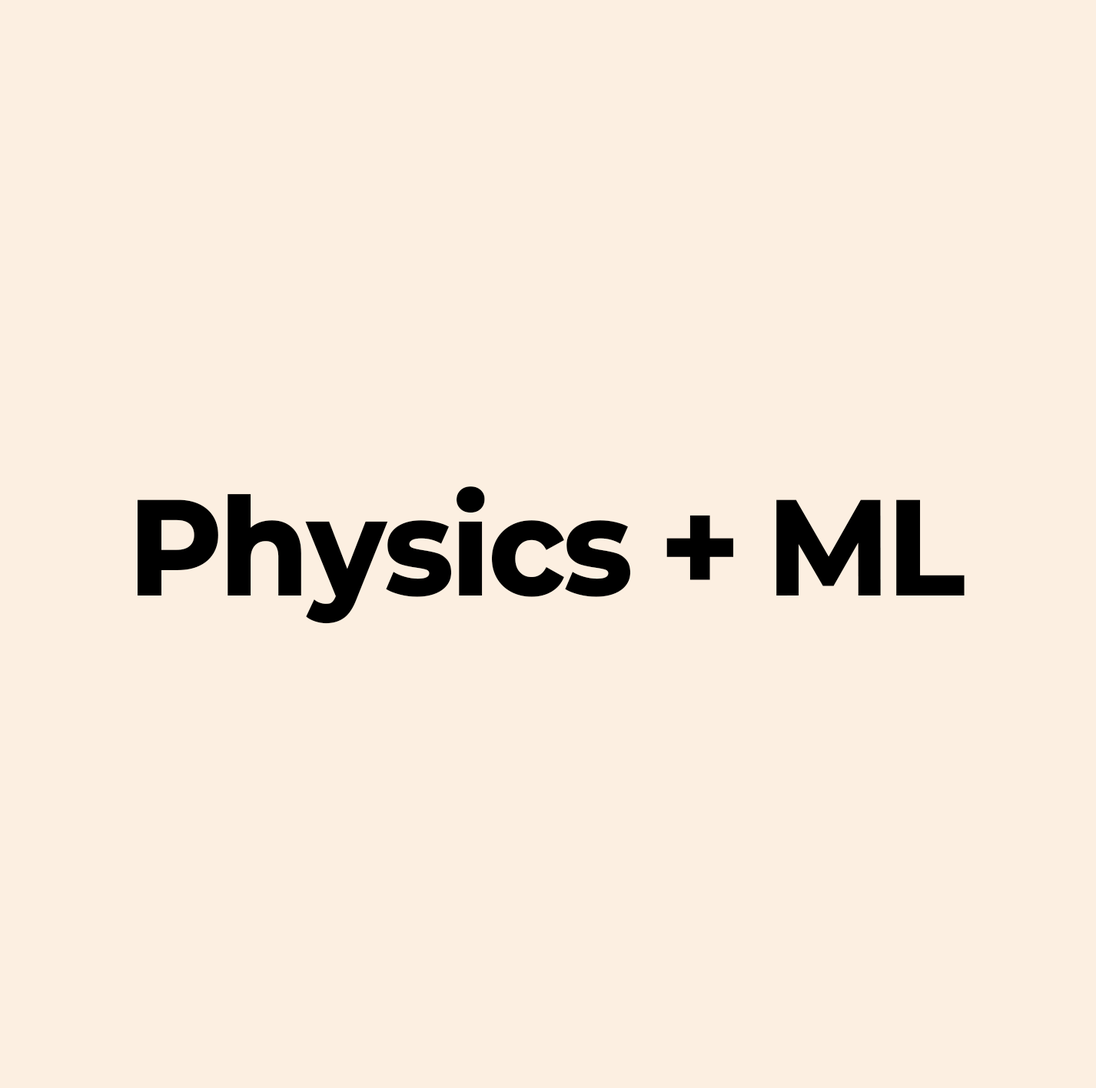
<style>
.page{position:relative;width:1096px;height:1088px;background:#fcefe1}
.page>*{position:absolute;margin:0}
.t1{font:123px "Paperlogy-9Black";color:#000000}
</style>
<div class="page">
<p class="t1" style="left:138px;top:486px;width:826px;height:138px">Physics + ML</p>
</div>
